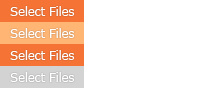
<style>
.page{position:relative;width:200px;height:88px;background:#ffffff}
.page>*{position:absolute;margin:0}
.t1{font:12px/22px "Verdana";letter-spacing:-0.025em;color:#ffffff}
.t2{font:12px/22px "Verdana";letter-spacing:-0.025em;color:#ebebeb}
</style>
<div class="page">
<p class="t1" style="left:10px;top:6px;width:65px;height:76px">Select Files<br>Select Files<br>Select Files<br><span class="t2">Select Files</span></p>
</div>
